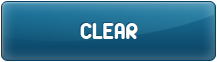
<style>
.page{position:relative;width:217px;height:62px}
.page>*{position:absolute;margin:0}
.t1{font:25px "zArista";color:#ffffff}
</style>
<div class="page">
<p class="t1" style="left:80px;top:23px;width:58px;height:16px">CLEAR</p>
</div>
